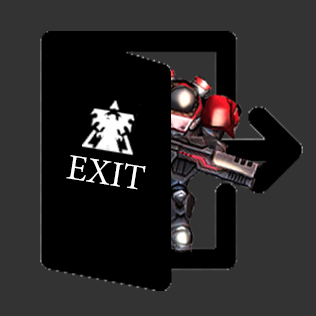
<style>
.page{position:relative;width:316px;height:316px;background:#333333}
.page>*{position:absolute;margin:0}
.t1{font:36px "MinionPro-Regular";color:#ffffff}
</style>
<div class="page">
<p class="t1" style="left:66px;top:155px;width:80px;height:35px;rotate:9deg">EXIT</p>
</div>
